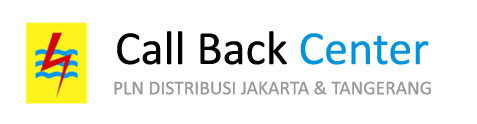
<style>
.page{position:relative;width:477px;height:124px;background:#ffffff}
.page>*{position:absolute;margin:0}
.t1{font:48px "Calibri";color:#000000}
.t2{font:48px "Calibri";color:#0092db}
.t3{font:19.6px "Calibri";color:#989898}
</style>
<div class="page">
<p class="t1" style="left:117px;top:31px;width:312px;height:34px">Call Back <span class="t2">Center</span></p>
<p class="t3" style="left:114px;top:81px;width:317px;height:14px">PLN DISTRIBUSI JAKARTA &amp; TANGERANG</p>
</div>
